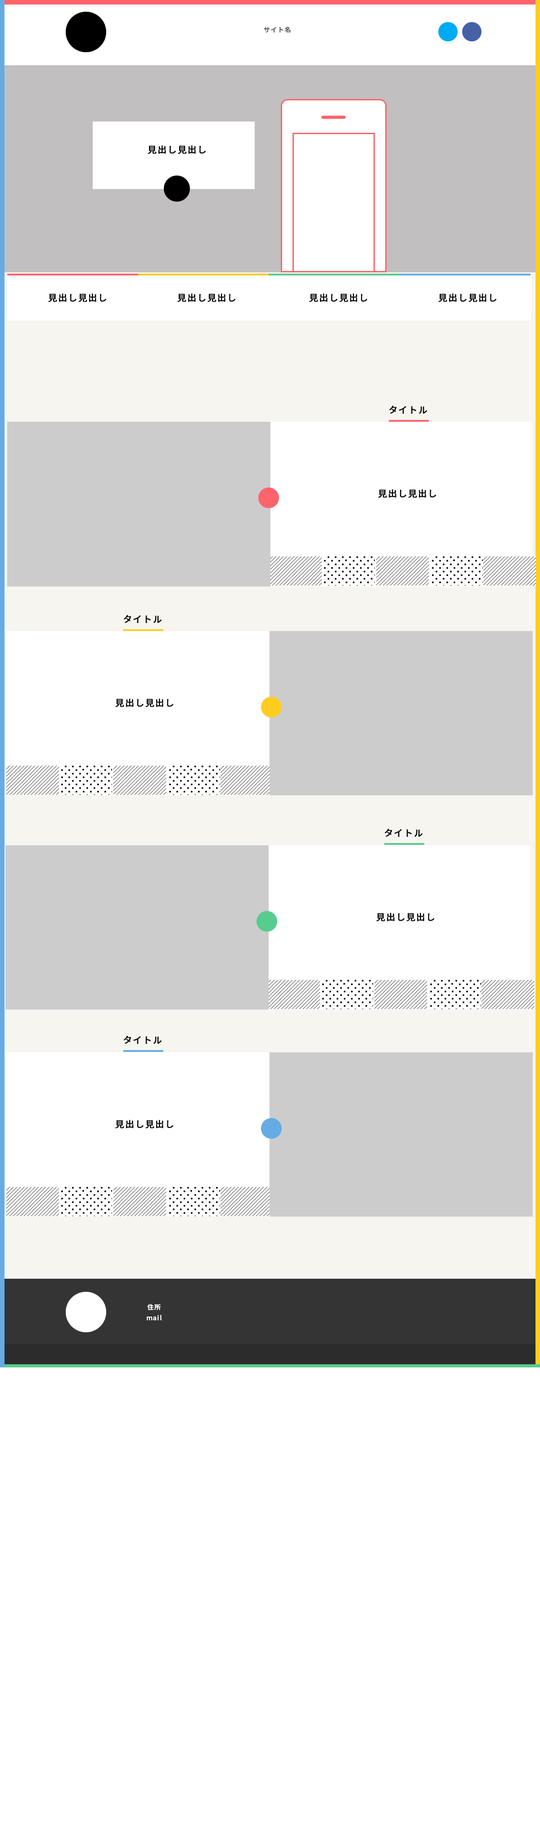
<style>
.page{position:relative;width:540px;height:1822px;background:#ffffff}
.page>*{position:absolute;margin:0}
.t1{font:6.3px "NotoSansCJKjp-Medium";letter-spacing:0.08em;color:#555555;font-weight:bold}
.t2{font:9px "NotoSansCJKjp-Medium";letter-spacing:0.08em;color:#090909;font-weight:bold}
.t3{font:6.3px "NotoSansCJKjp-Medium";letter-spacing:0.08em;color:#ffffff;font-weight:bold}
</style>
<div class="page">
<p class="t1" style="left:264px;top:27px;width:27px;height:6px">サイト名</p>
<p class="t2" style="left:148px;top:145px;width:58px;height:9px">見出し見出し</p>
<p class="t2" style="left:48px;top:293px;width:59px;height:9px">見出し見出し</p>
<p class="t2" style="left:177px;top:293px;width:59px;height:9px">見出し見出し</p>
<p class="t2" style="left:309px;top:293px;width:59px;height:9px">見出し見出し</p>
<p class="t2" style="left:438px;top:293px;width:59px;height:9px">見出し見出し</p>
<p class="t2" style="left:389px;top:405px;width:39px;height:9px">タイトル</p>
<p class="t2" style="left:378px;top:490px;width:58px;height:8px">見出し見出し</p>
<p class="t2" style="left:378px;top:489px;width:58px;height:9px">見出し見出し</p>
<p class="t2" style="left:123px;top:615px;width:39px;height:8px">タイトル</p>
<p class="t2" style="left:115px;top:698px;width:59px;height:9px">見出し見出し</p>
<p class="t2" style="left:384px;top:828px;width:39px;height:9px">タイトル</p>
<p class="t2" style="left:376px;top:913px;width:59px;height:8px">見出し見出し</p>
<p class="t2" style="left:123px;top:1035px;width:39px;height:9px">タイトル</p>
<p class="t2" style="left:115px;top:1120px;width:59px;height:8px">見出し見出し</p>
<p class="t3" style="left:147px;top:1304px;width:15px;height:16px;text-align:center">住所<br>mail</p>
</div>
